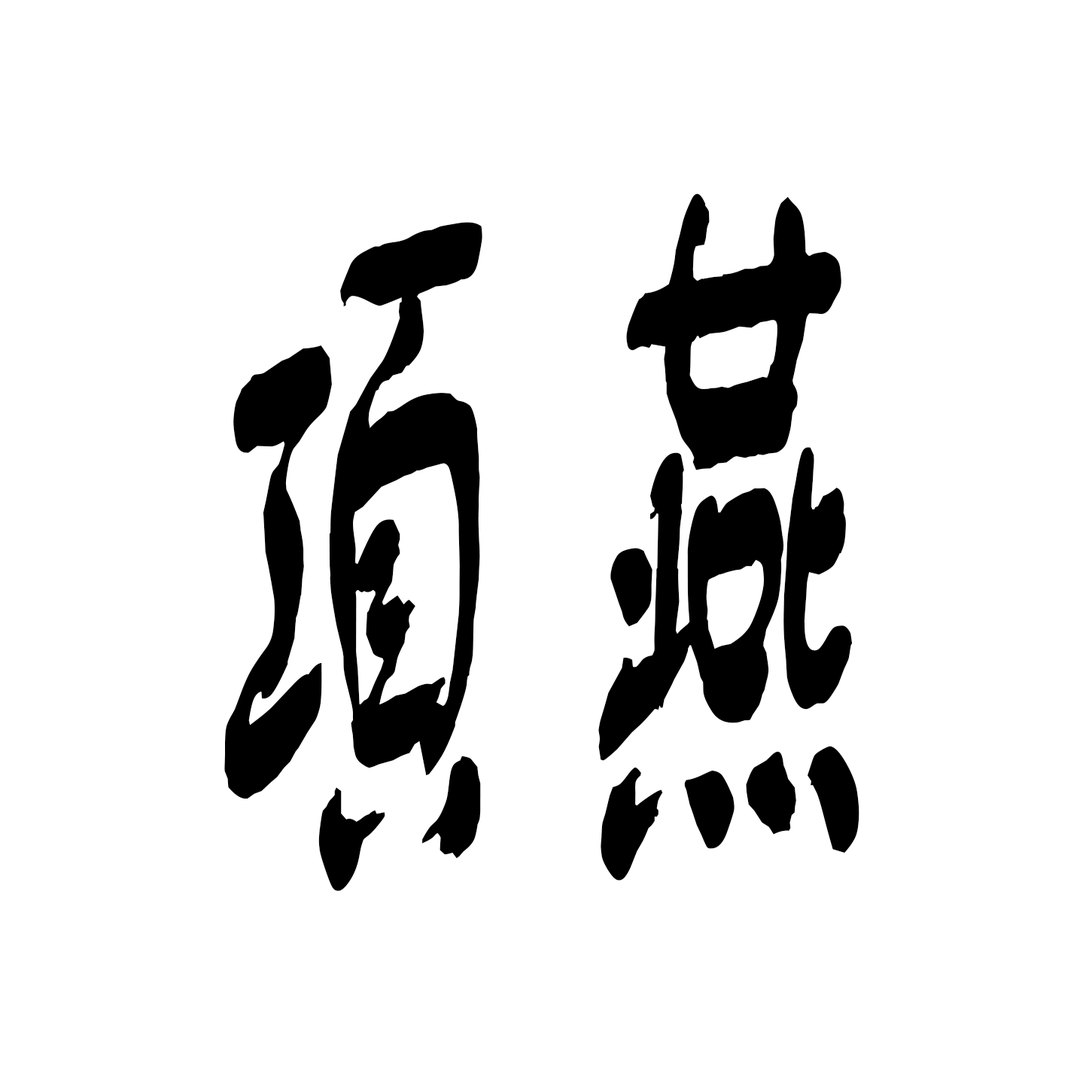
<style>
.page{position:relative;width:1092px;height:1092px;background:#ffffff}
.page>*{position:absolute;margin:0}
.t1{font:804.8px "HYn1gf";color:#000000;scale:0.45 1}
</style>
<div class="page">
<p class="t1" style="left:224px;top:193px;width:635px;height:698px">项燕</p>
</div>
